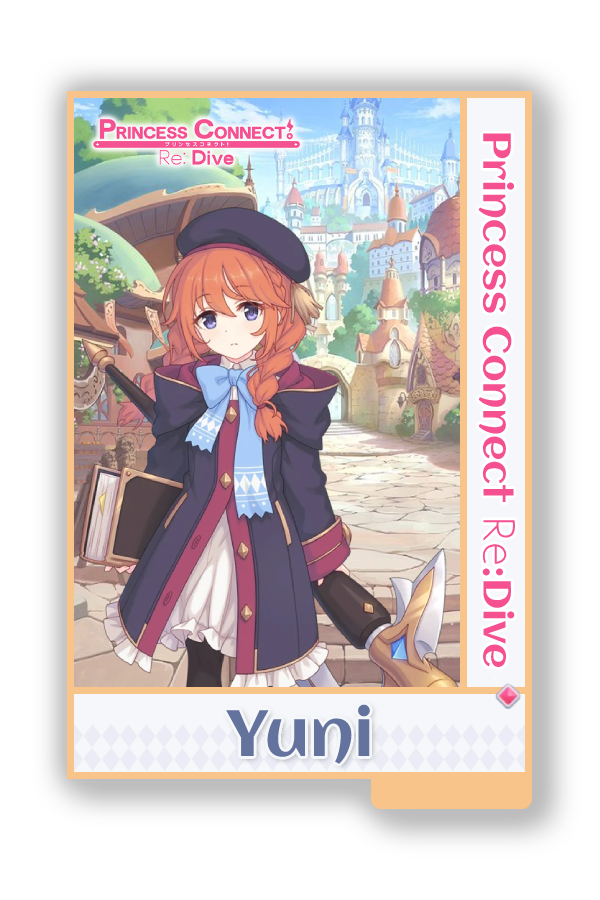
<style>
.page{position:relative;width:600px;height:900px;background:#ffffff}
.page>*{position:absolute;margin:0}
.t1{font:39px "Aclonica-Regular";color:#f55191}
.t2{font:39px "AaarghNormal";color:#f55191}
.t3{font:65px "Aclonica-Regular";color:#64739d}
</style>
<div class="page">
<p class="t1" style="left:478px;top:133px;width:38px;height:534px;rotate:90deg">Princess Connect <span class="t2">Re</span>:Dive</p>
<p class="t3" style="left:226px;top:704px;width:144px;height:60px">Yuni</p>
</div>
